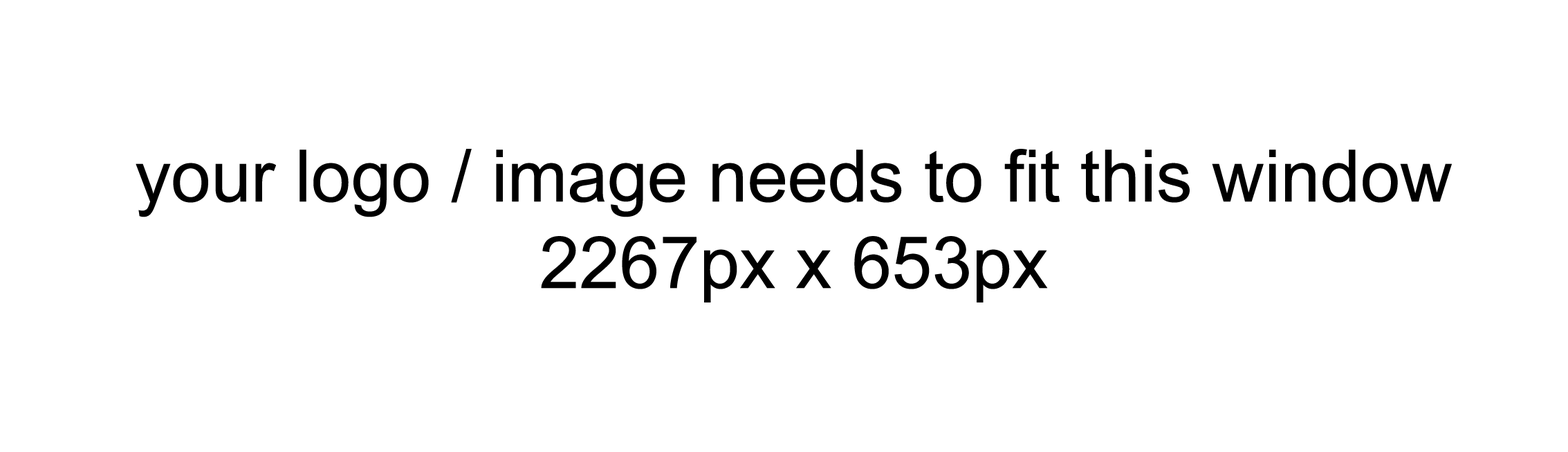
<style>
.page{position:relative;width:1568px;height:452px;background:#ffffff}
.page>*{position:absolute;margin:0}
.t1{font:72px "ArialMT";color:#000000}
</style>
<div class="page">
<p class="t1" style="left:136px;top:149px;width:1316px;height:153px;text-align:center">your logo / image needs to fit this window<br>2267px x 653px</p>
</div>
